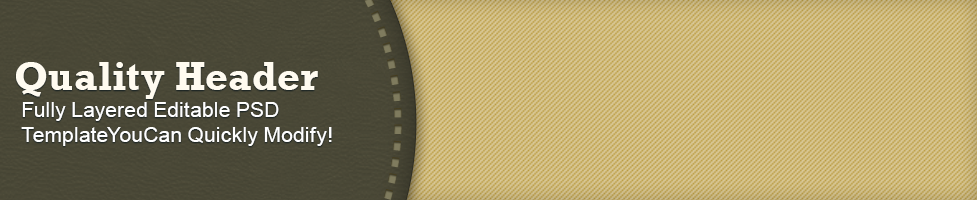
<style>
.page{position:relative;width:977px;height:200px}
.page>*{position:absolute;margin:0}
.t1{font:39.9px "Rockwell-Bold";color:#ffffff}
.t2{font:20.5px "ArialMT";color:#ffffff}
</style>
<div class="page">
<p class="t1" style="left:16px;top:62px;width:302px;height:37px">Quality Header</p>
<p class="t2" style="left:21px;top:102px;width:311px;height:44px">Fully Layered Editable PSD <br>TemplateYouCan Quickly Modify!</p>
</div>
